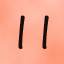
<style>
.page{position:relative;width:64px;height:64px}
.page>*{position:absolute;margin:0}
.t1{font:48px "HuiFont";color:#180e0b}
</style>
<div class="page">
<p class="t1" style="left:18px;top:15px;width:31px;height:35px">11</p>
</div>
